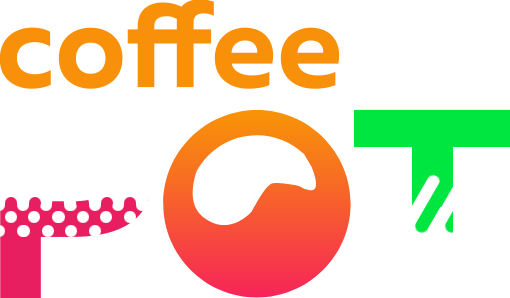
<style>
.page{position:relative;width:510px;height:298px;background:#ffffff}
.page>*{position:absolute;margin:0}
.t1{font:120px "MullerBold";color:#f89109}
</style>
<div class="page">
<p class="t1" style="left:0px;top:0px;width:340px;height:89px">coffee</p>
</div>
